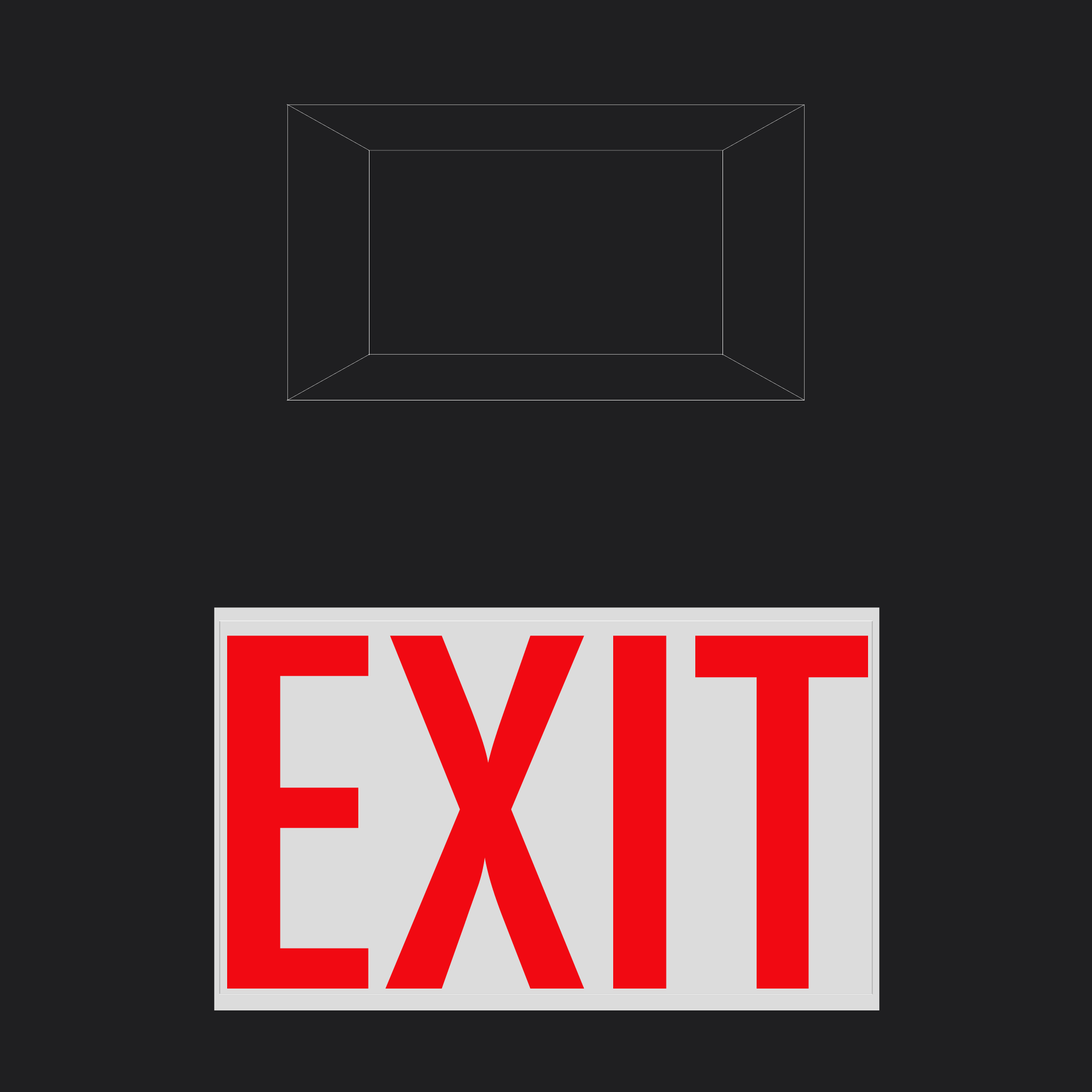
<style>
.page{position:relative;width:1092px;height:1092px;background:#1f1f21}
.page>*{position:absolute;margin:0}
.t1{font:468.1px "Futura-CondensedMedium";color:#f10912;scale:1.12 1}
</style>
<div class="page">
<p class="t1" style="left:227px;top:636px;width:641px;height:353px">EXIT</p>
</div>
